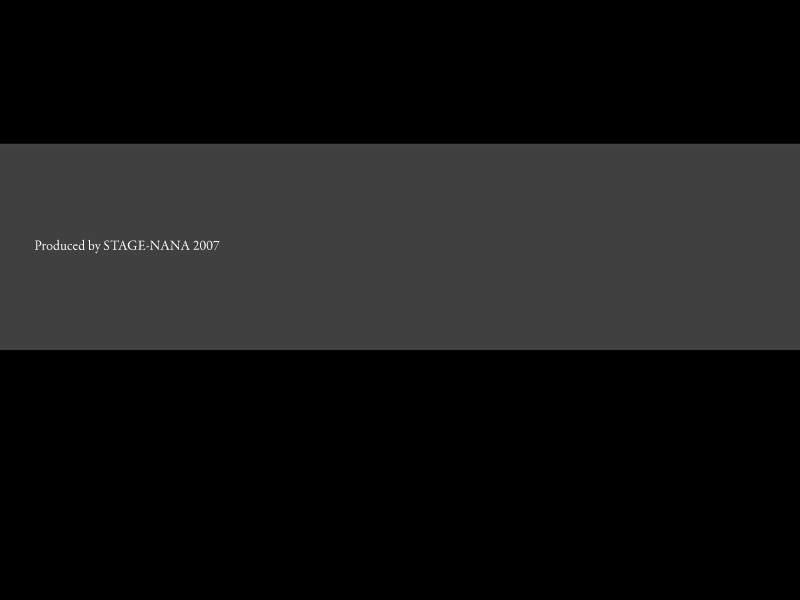
<style>
.page{position:relative;width:800px;height:600px;background:#000000}
.page>*{position:absolute;margin:0}
.t1{font:14px "GaramondPremrPro";color:#ffffff}
</style>
<div class="page">
<p class="t1" style="left:35px;top:239px;width:185px;height:15px">Produced by STAGE-NANA 2007</p>
</div>
